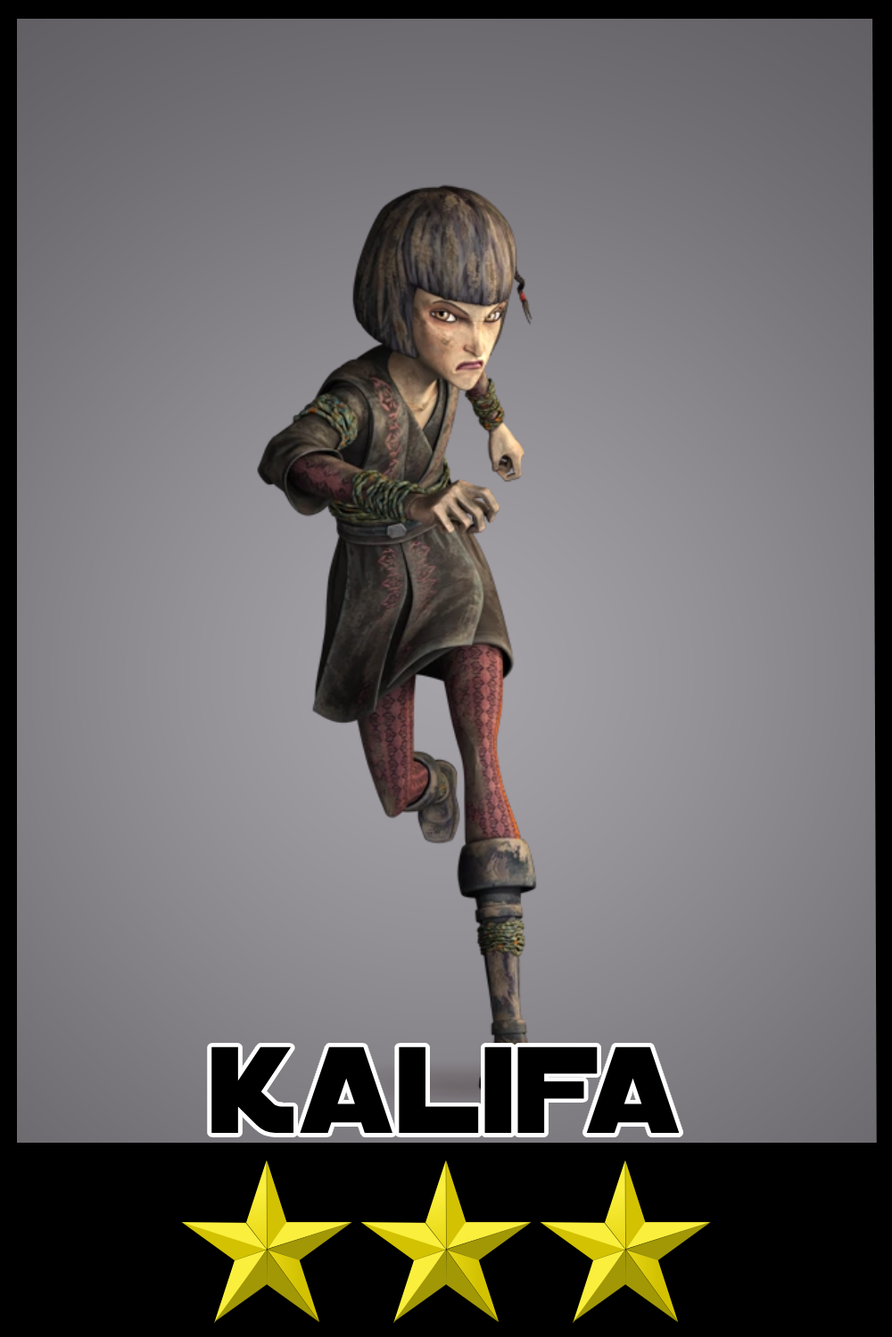
<style>
.page{position:relative;width:892px;height:1337px}
.page>*{position:absolute;margin:0}
.t1{font:131.9px "DistantGalaxy";color:#000000}
</style>
<div class="page">
<p class="t1" style="left:211px;top:1047px;width:468px;height:86px">kalifa</p>
</div>
